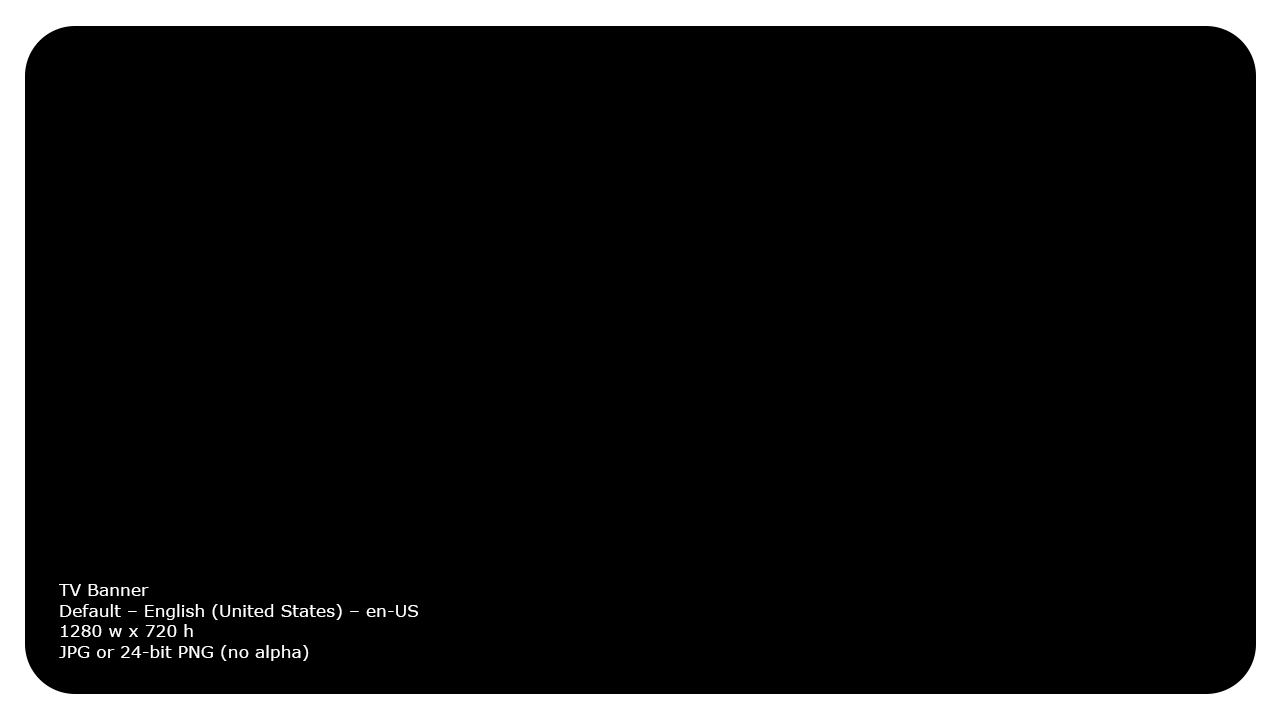
<style>
.page{position:relative;width:1280px;height:720px;background:#000000}
.page>*{position:absolute;margin:0}
.t1{font:17.1px "Verdana";color:#ffffff}
</style>
<div class="page">
<p class="t1" style="left:59px;top:584px;width:359px;height:77px">TV Banner<br>Default – English (United States) – en-US<br>1280 w x 720 h<br>JPG or 24-bit PNG (no alpha)</p>
</div>
